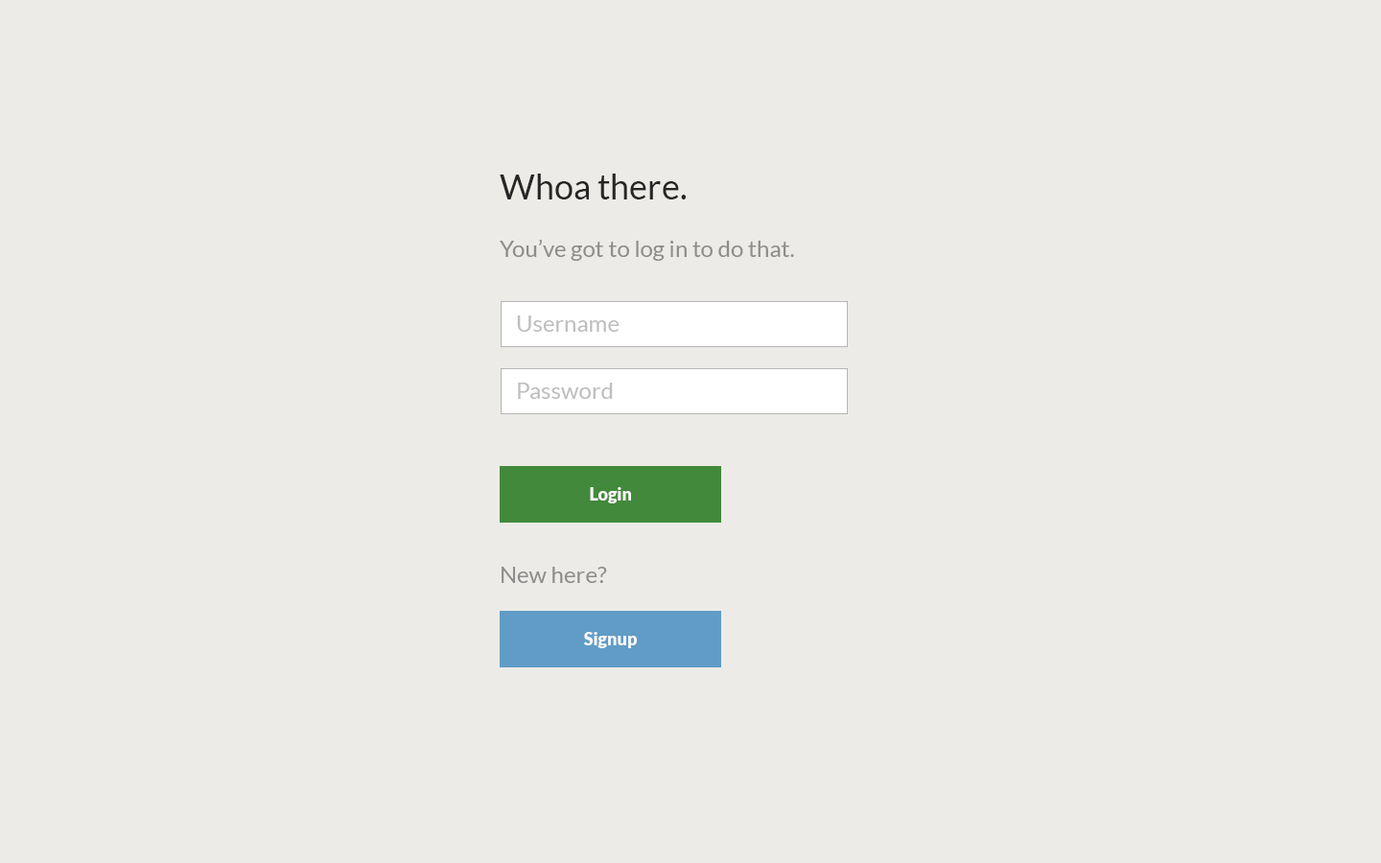
<style>
.page{position:relative;width:1381px;height:863px;background:#ecebe7}
.page>*{position:absolute;margin:0}
.t1{font:34.5px "Lato-Regular";color:#262626}
.t2{font:23px "Lato-Regular";color:#8d8d8d}
.t3{font:23px "Lato-Regular";color:#bebebe}
.t4{font:17.3px "Lato-Black";color:#f9f9f9}
</style>
<div class="page">
<p class="t1" style="left:500px;top:174px;width:186px;height:26px">Whoa there.</p>
<p class="t2" style="left:500px;top:239px;width:294px;height:22px">You’ve got to log in to do that.</p>
<p class="t3" style="left:517px;top:316px;width:103px;height:16px">Username</p>
<p class="t3" style="left:518px;top:383px;width:95px;height:16px">Password</p>
<p class="t4" style="left:590px;top:487px;width:41px;height:17px">Login</p>
<p class="t2" style="left:502px;top:567px;width:105px;height:16px">New here?</p>
<p class="t4" style="left:584px;top:632px;width:53px;height:16px">Signup</p>
</div>
